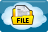
<style>
.page{position:relative;width:48px;height:32px}
.page>*{position:absolute;margin:0}
.t1{font:7.4px "MyriadPro-Regular";color:#000000;scale:0.96 1}
</style>
<div class="page">
<p class="t1" style="left:17px;top:18px;width:12px;height:5px">FILE</p>
</div>
